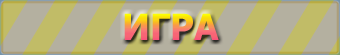
<style>
.page{position:relative;width:340px;height:55px;background:#b4b0a0}
.page>*{position:absolute;margin:0}
.t1{font:36px "Tahoma-Bold"}
</style>
<div class="page">
<p class="t1" style="left:124px;top:13px;width:95px;height:27px">ИГРА</p>
</div>
